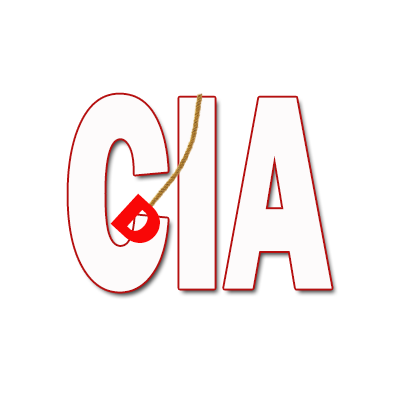
<style>
.page{position:relative;width:400px;height:400px;background:#ffffff}
.page>*{position:absolute;margin:0}
.t1{font:285.9px "FranklinGothic-Heavy";color:#fdfbfb;font-variant:small-caps;scale:0.59 1}
.t2{font:61.4px "FranklinGothic-Heavy";color:#f90707;font-variant:small-caps;scale:1.12 1}
</style>
<div class="page">
<p class="t1" style="left:68px;top:94px;width:264px;height:198px">CIA</p>
<p class="t2" style="left:110px;top:193px;width:50px;height:50px;rotate:43deg">D</p>
</div>
